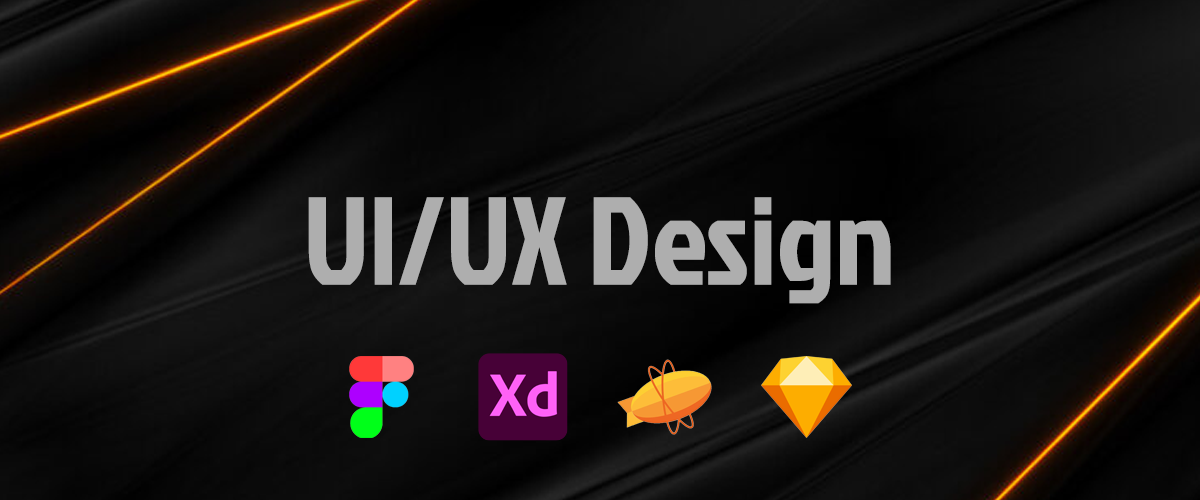
<style>
.page{position:relative;width:1200px;height:500px}
.page>*{position:absolute;margin:0}
.t1{font:124.4px "JockeyOne-Regular";color:#aeaeae}
</style>
<div class="page">
<p class="t1" style="left:308px;top:197px;width:583px;height:107px">UI/UX Design</p>
</div>
